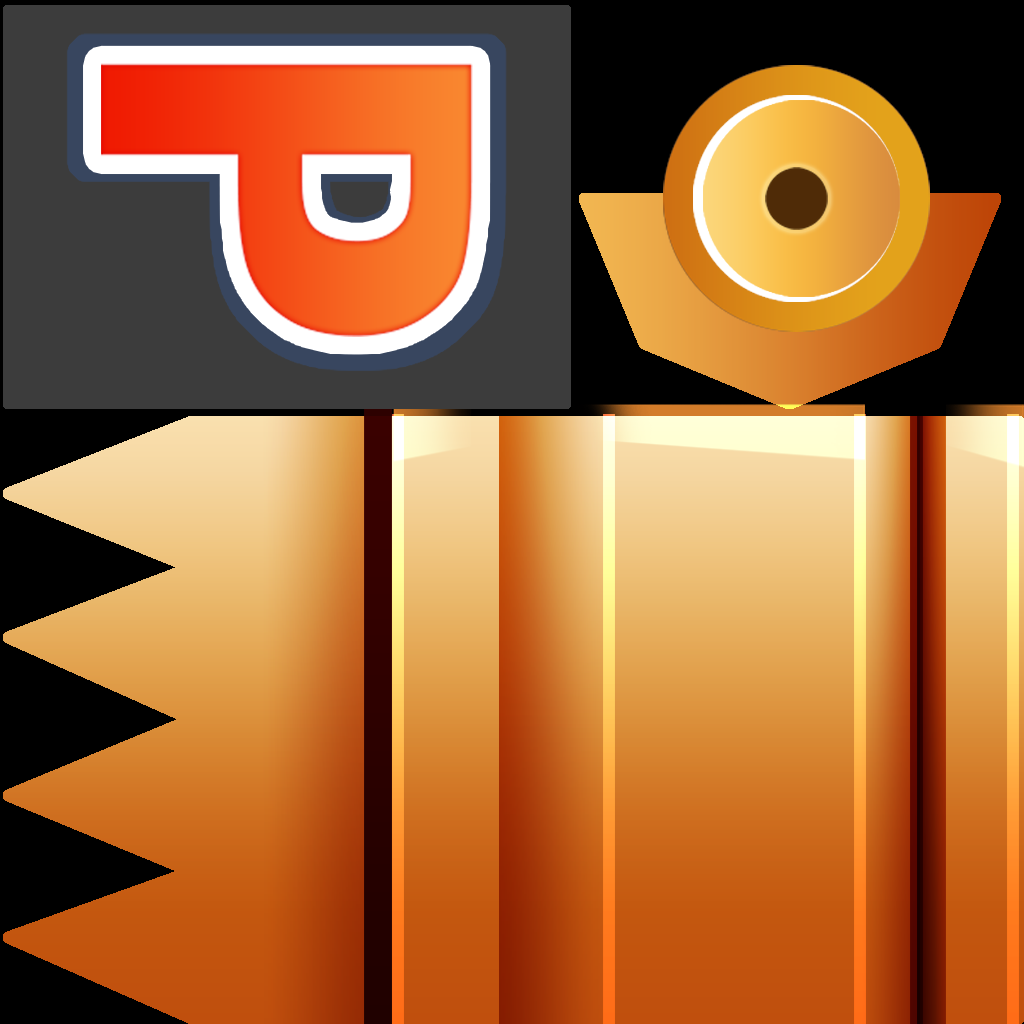
<style>
.page{position:relative;width:1024px;height:1024px}
.page>*{position:absolute;margin:0}
.t1{font:555.6px "FranklinGothic-DemiCond";text-transform:uppercase;scale:1.11 1}
</style>
<div class="page">
<p class="t1" style="left:101px;top:63px;width:372px;height:274px;rotate:90deg">P</p>
</div>
